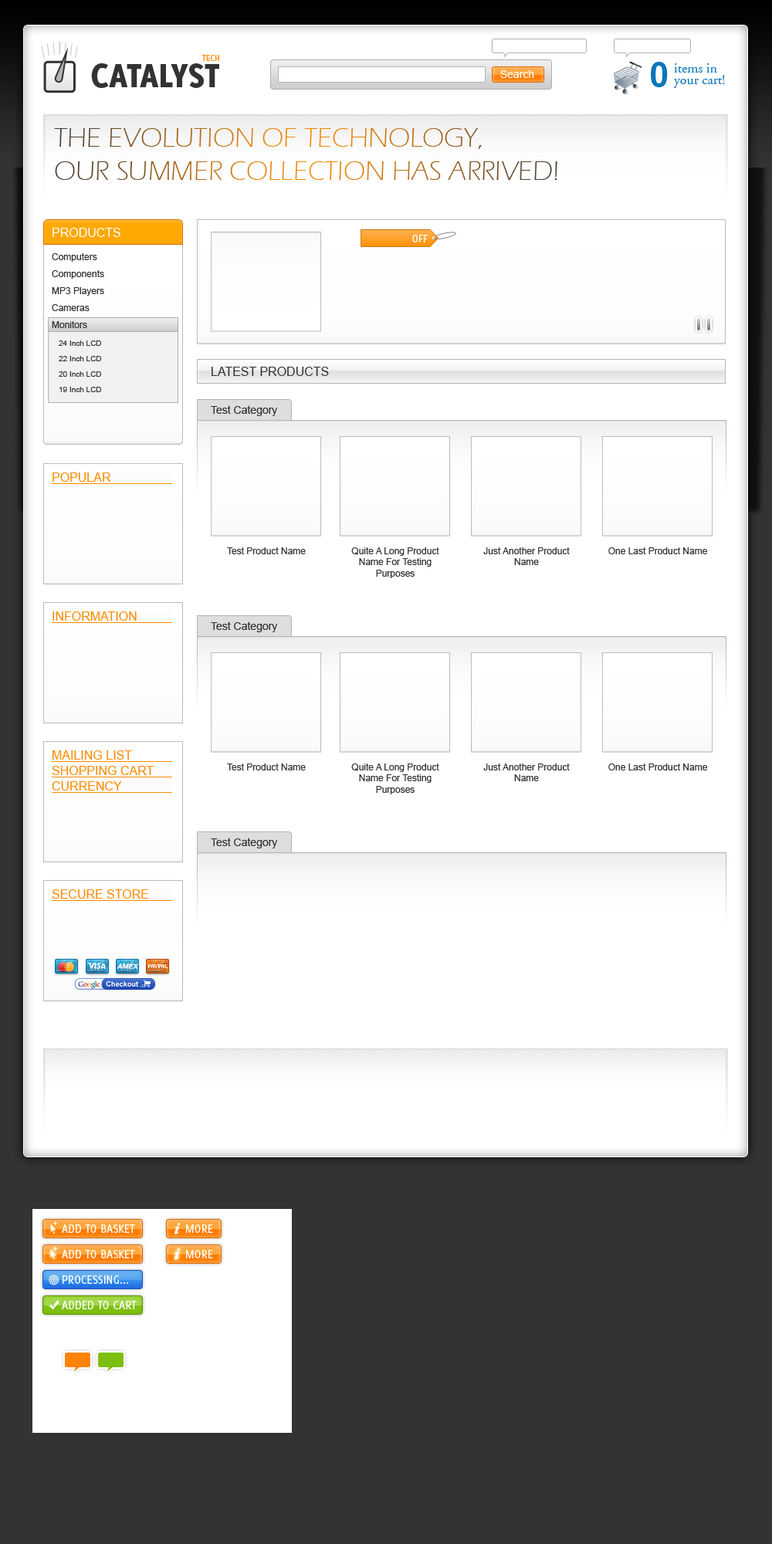
<style>
.page{position:relative;width:772px;height:1544px;background:#ffffff}
.page>*{position:absolute;margin:0}
.t1{font:37.1px "Delicious-Heavy";color:#333333}
.t2{font:9.3px "Delicious-Roman";color:#ff8a00}
.t3{font:35.5px "Arial-BoldMT";color:#0a76bb}
.t4{font:13.9px "AGaramondLT-Regular";color:#0a76bb}
.t5{font:10.8px "ArialMT";color:#ffffff}
.t6{font:27.8px "ErasITC-Light"}
.t7{font:12.4px "ArialMT";color:#ffffff}
.t8{font:10.8px "OfficinaSanITC-BookOS";color:#f9fafb}
.t9{font:9.3px "ArialMT";color:#333333}
.t10{font:7.7px "ArialMT";color:#333333}
.t11{font:12.4px "ArialMT";color:#333333}
.t12{font:10.8px "ArialMT";color:#333333}
.t13{font:12.4px "ArialMT";color:#ff8a00}
.t14{font:12.4px "Delicious-Roman";color:#ffffff}
</style>
<div class="page">
<p class="t1" style="left:91px;top:63px;width:128px;height:25px">CATALYST</p>
<p class="t2" style="left:202px;top:55px;width:17px;height:6px">TECH</p>
<p class="t3" style="left:651px;top:62px;width:17px;height:25px">0</p>
<p class="t4" style="left:674px;top:63px;width:43px;height:10px">items in</p>
<p class="t5" style="left:500px;top:70px;width:34px;height:8px">Search</p>
<p class="t4" style="left:674px;top:75px;width:51px;height:13px">your cart!</p>
<p class="t6" style="left:54px;top:128px;width:503px;height:52px">THE EVOLUTION OF TECHNOLOGY,<br>OUR SUMMER COLLECTION HAS ARRIVED!</p>
<p class="t7" style="left:53px;top:228px;width:67px;height:9px">PRODUCTS</p>
<p class="t8" style="left:412px;top:235px;width:16px;height:7px">OFF</p>
<p class="t9" style="left:52px;top:253px;width:45px;height:9px">Computers</p>
<p class="t9" style="left:52px;top:270px;width:52px;height:9px">Components</p>
<p class="t9" style="left:52px;top:287px;width:52px;height:9px">MP3 Players</p>
<p class="t9" style="left:52px;top:304px;width:38px;height:7px">Cameras</p>
<p class="t9" style="left:52px;top:321px;width:35px;height:7px">Monitors</p>
<p class="t10" style="left:59px;top:341px;width:42px;height:5px">24 Inch LCD</p>
<p class="t10" style="left:59px;top:356px;width:42px;height:5px">22 Inch LCD</p>
<p class="t10" style="left:59px;top:371px;width:42px;height:6px">20 Inch LCD</p>
<p class="t11" style="left:212px;top:367px;width:117px;height:9px">LATEST PRODUCTS</p>
<p class="t10" style="left:59px;top:387px;width:42px;height:5px">19 Inch LCD</p>
<p class="t12" style="left:211px;top:405px;width:67px;height:11px">Test Category</p>
<p class="t13" style="left:53px;top:473px;width:58px;height:9px">POPULAR</p>
<p class="t9" style="left:227px;top:547px;width:79px;height:7px">Test Product Name</p>
<p class="t9" style="left:351px;top:547px;width:88px;height:31px;text-align:center">Quite A Long Product<br>Name For Testing<br>Purposes</p>
<p class="t9" style="left:483px;top:547px;width:87px;height:18px;text-align:center">Just Another Product<br>Name</p>
<p class="t9" style="left:608px;top:547px;width:99px;height:7px">One Last Product Name</p>
<p class="t13" style="left:53px;top:612px;width:84px;height:9px">INFORMATION</p>
<p class="t12" style="left:211px;top:622px;width:67px;height:10px">Test Category</p>
<p class="t13" style="left:53px;top:751px;width:79px;height:9px">MAILING LIST</p>
<p class="t13" style="left:52px;top:766px;width:102px;height:9px">SHOPPING CART</p>
<p class="t9" style="left:227px;top:764px;width:79px;height:7px">Test Product Name</p>
<p class="t9" style="left:351px;top:764px;width:88px;height:31px;text-align:center">Quite A Long Product<br>Name For Testing<br>Purposes</p>
<p class="t9" style="left:483px;top:764px;width:87px;height:17px;text-align:center">Just Another Product<br>Name</p>
<p class="t9" style="left:608px;top:764px;width:99px;height:7px">One Last Product Name</p>
<p class="t13" style="left:52px;top:781px;width:70px;height:10px">CURRENCY</p>
<p class="t12" style="left:211px;top:838px;width:67px;height:11px">Test Category</p>
<p class="t13" style="left:52px;top:890px;width:97px;height:9px">SECURE STORE</p>
<p class="t14" style="left:62px;top:1225px;width:73px;height:8px">ADD TO BASKET</p>
<p class="t14" style="left:186px;top:1225px;width:27px;height:8px">MORE</p>
<p class="t14" style="left:62px;top:1250px;width:73px;height:9px">ADD TO BASKET</p>
<p class="t14" style="left:186px;top:1250px;width:27px;height:9px">MORE</p>
<p class="t14" style="left:63px;top:1276px;width:66px;height:8px">PROCESSING...</p>
<p class="t14" style="left:62px;top:1301px;width:75px;height:9px">ADDED TO CART</p>
</div>
